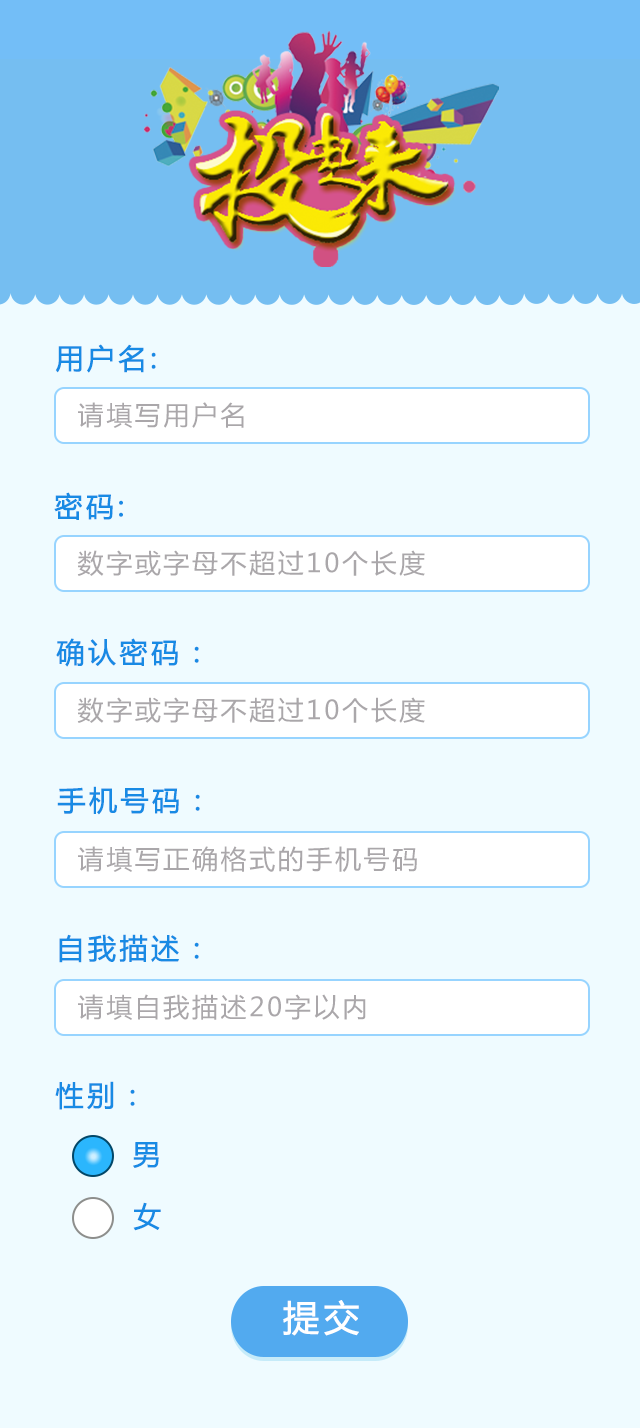
<style>
.page{position:relative;width:640px;height:1428px;background:#effbff}
.page>*{position:absolute;margin:0}
.t1{font:28px "MicrosoftYaHei";letter-spacing:0.1em;color:#188ae4;font-weight:bold}
.t2{font:26px "MicrosoftYaHei";letter-spacing:0.1em;color:#aaa7aa}
.t3{font:36px "MicrosoftYaHei";letter-spacing:0.1em;color:#ffffff;font-weight:bold}
</style>
<div class="page">
<p class="t1" style="left:55px;top:344px;width:101px;height:29px">用户名:</p>
<p class="t2" style="left:78px;top:402px;width:166px;height:26px">请填写用户名</p>
<p class="t1" style="left:54px;top:492px;width:69px;height:28px">密码:</p>
<p class="t2" style="left:77px;top:550px;width:348px;height:26px">数字或字母不超过10个长度</p>
<p class="t1" style="left:56px;top:638px;width:143px;height:29px">确认密码：</p>
<p class="t2" style="left:77px;top:697px;width:348px;height:26px">数字或字母不超过10个长度</p>
<p class="t1" style="left:57px;top:786px;width:143px;height:29px">手机号码：</p>
<p class="t2" style="left:78px;top:846px;width:339px;height:26px">请填写正确格式的手机号码</p>
<p class="t1" style="left:59px;top:934px;width:140px;height:29px">自我描述：</p>
<p class="t2" style="left:78px;top:994px;width:288px;height:26px">请填自我描述20字以内</p>
<p class="t1" style="left:55px;top:1081px;width:80px;height:29px">性别：</p>
<p class="t1" style="left:133px;top:1142px;width:26px;height:26px">男</p>
<p class="t1" style="left:133px;top:1202px;width:28px;height:29px">女</p>
<p class="t3" style="left:283px;top:1300px;width:76px;height:36px">提交</p>
</div>
